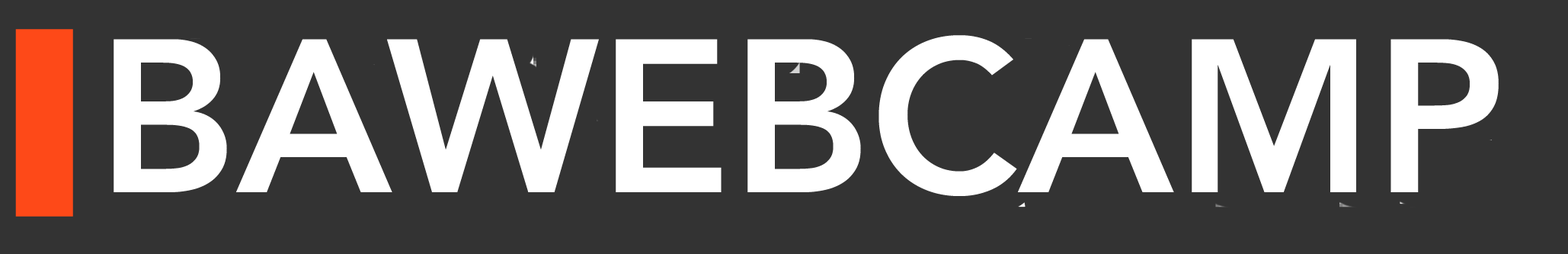
<style>
.page{position:relative;width:1568px;height:254px;background:#333333}
.page>*{position:absolute;margin:0}
.t1{font:215.9px "Avenir-Heavy";color:#ffffff}
</style>
<div class="page">
<p class="t1" style="left:114px;top:35px;width:1385px;height:161px">BAWEBCAMP</p>
</div>
